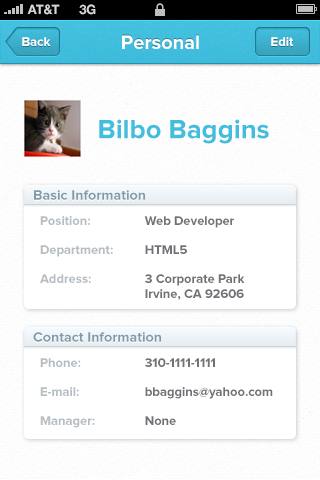
<style>
.page{position:relative;width:320px;height:480px;background:#ffffff}
.page>*{position:absolute;margin:0}
.t1{font:13px "HelveticaNeue-Bold";color:#d4d4d4;text-transform:uppercase}
.t2{font:13px "ProximaNova-Bold";color:#ffffff}
.t3{font:20px "ProximaNova-Bold";color:#ffffff}
.t4{font:27.3px "ProximaNova-Bold";color:#41bedd}
.t5{font:14px "ProximaNova-Bold";color:#7f9ba9}
.t6{font:13px/14.5px "ProximaNova-Bold";color:#6f7276}
.t7{font:13px/14.5px "ProximaNova-Bold";color:#b6bdc3}
</style>
<div class="page">
<p class="t1" style="left:27px;top:4px;width:33px;height:11px">AT&amp;t</p>
<p class="t1" style="left:79px;top:4px;width:17px;height:11px">3G</p>
<p class="t2" style="left:22px;top:37px;width:29px;height:9px">Back</p>
<p class="t3" style="left:122px;top:35px;width:77px;height:14px">Personal</p>
<p class="t2" style="left:271px;top:37px;width:23px;height:9px">Edit</p>
<p class="t4" style="left:99px;top:119px;width:170px;height:25px">Bilbo Baggins</p>
<p class="t5" style="left:34px;top:190px;width:111px;height:10px">Basic Information</p>
<p class="t6" style="left:40px;top:216px;width:205px;height:84px"><span class="t7">Position: </span>  Web Developer<br><br><span class="t7">Department: </span> HTML5<br><br><span class="t7">Address: </span>  3 Corporate Park<br>    Irvine, CA 92606</p>
<p class="t5" style="left:33px;top:332px;width:128px;height:10px">Contact Information</p>
<p class="t6" style="left:40px;top:358px;width:233px;height:70px"><span class="t7">Phone: </span>  310-1111-1111<br><br><span class="t7">E-mail: </span>  bbaggins@yahoo.com<br><br><span class="t7">Manager: </span> None</p>
</div>
